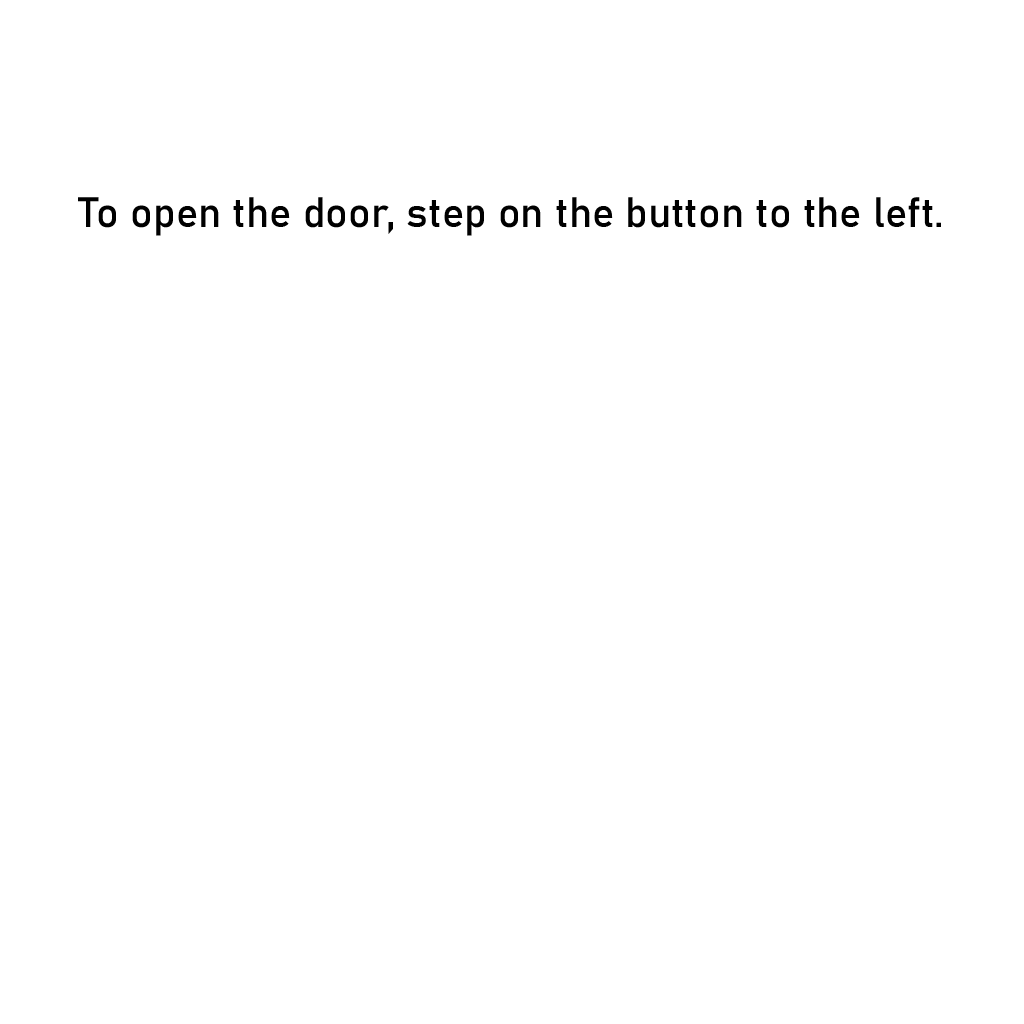
<style>
.page{position:relative;width:1024px;height:1024px;background:#ffffff}
.page>*{position:absolute;margin:0}
.t1{font:41.7px "Bahnschrift";color:#000000}
</style>
<div class="page">
<p class="t1" style="left:78px;top:197px;width:863px;height:39px">To open the door, step on the button to the left.</p>
</div>
